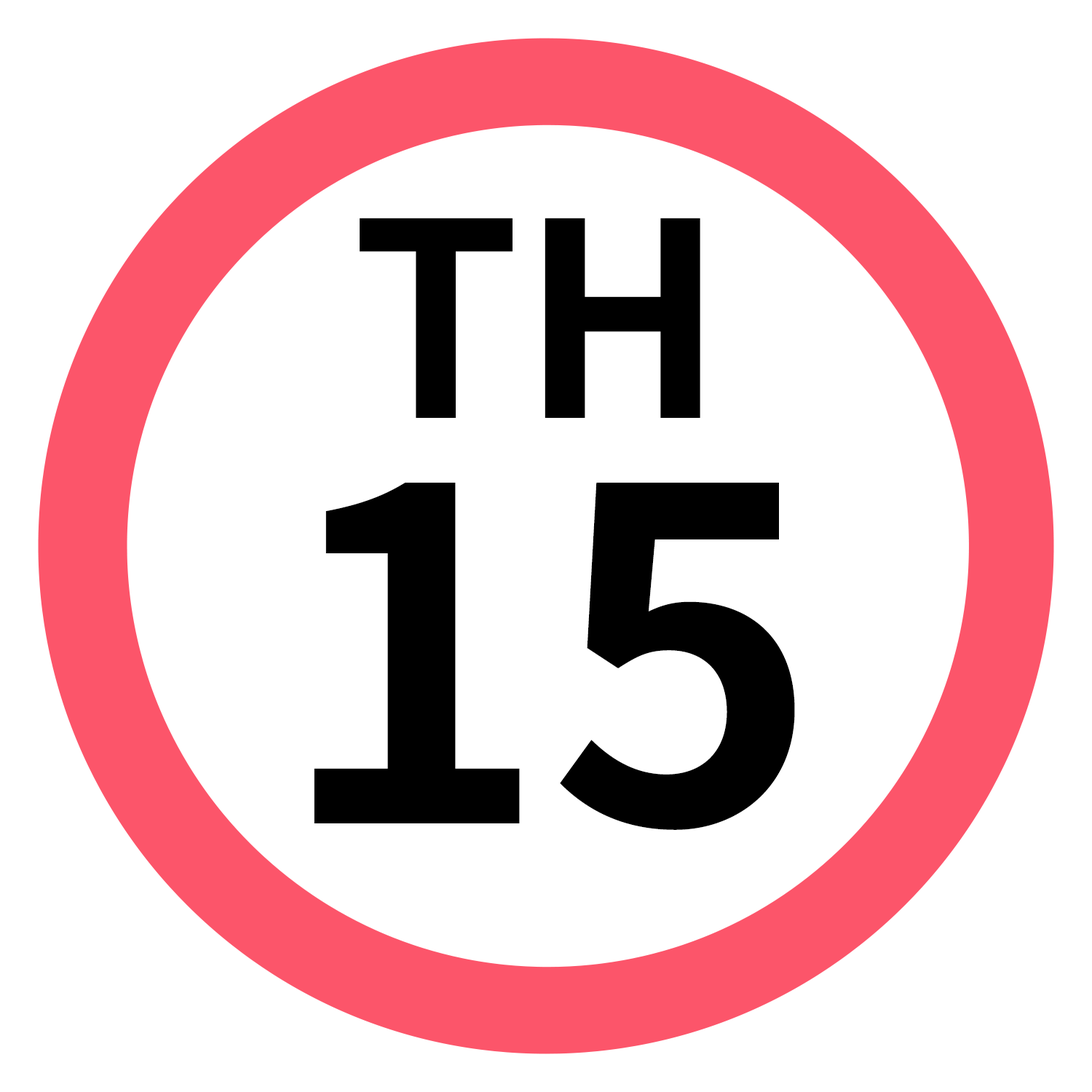
<style>
.page{position:relative;width:1092px;height:1092px;background:#ffffff}
.page>*{position:absolute;margin:0}
.t1{font:269.8px "NotoSansJP-Bold";color:#000000}
.t2{font:460.5px "NotoSansJP-Bold";color:#000000}
</style>
<div class="page">
<p class="t1" style="left:360px;top:218px;width:340px;height:200px">TH</p>
<p class="t2" style="left:314px;top:483px;width:481px;height:347px">15</p>
</div>
